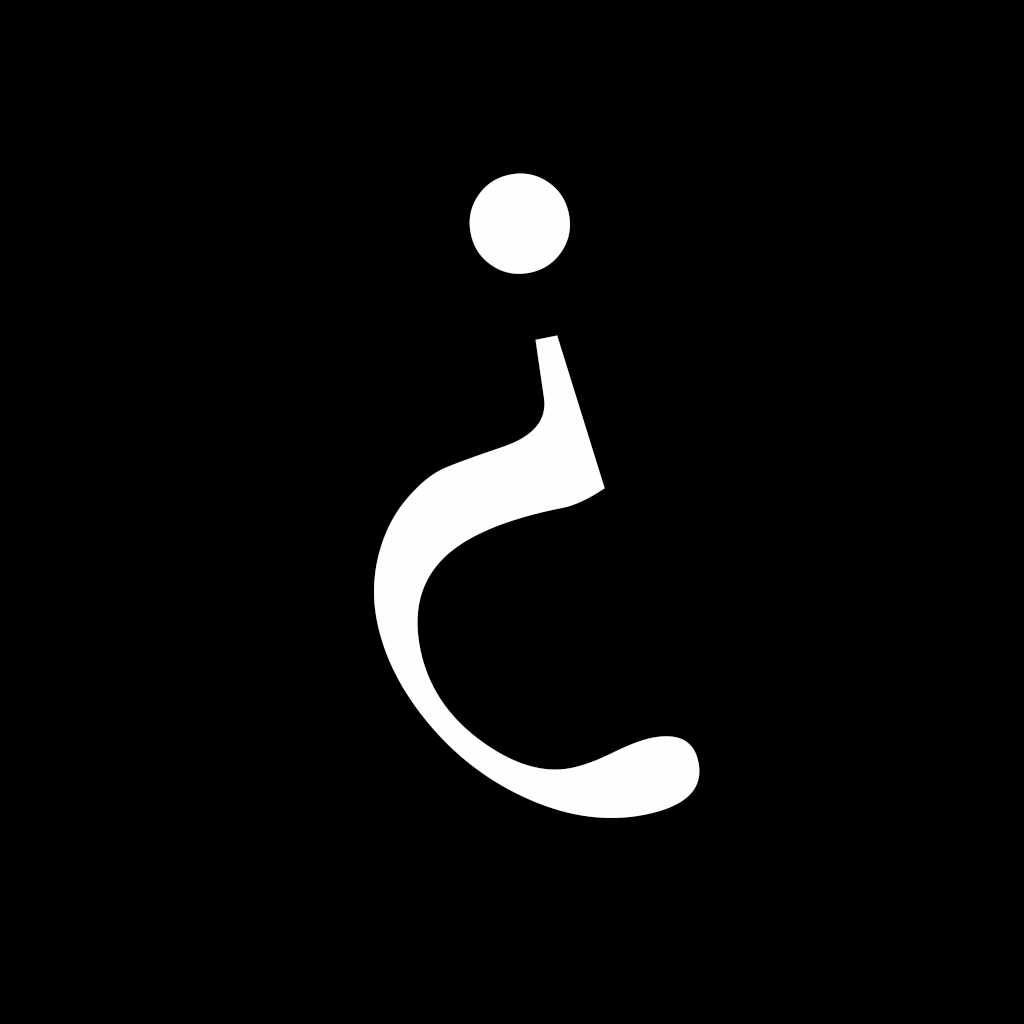
<style>
.page{position:relative;width:1024px;height:1024px;background:#000000}
.page>*{position:absolute;margin:0}
.t1{font:1000px "STFangsong";color:#fefefe}
</style>
<div class="page">
<p class="t1" style="left:374px;top:173px;width:326px;height:645px;rotate:-11deg">¿</p>
</div>
